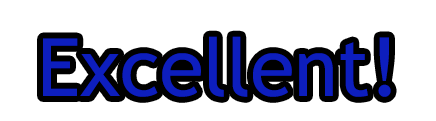
<style>
.page{position:relative;width:436px;height:121px;background:#ffffff}
.page>*{position:absolute;margin:0}
.t1{font:80px "TrebuchetMS";color:#0d1ebe}
</style>
<div class="page">
<p class="t1" style="left:43px;top:36px;width:348px;height:61px">Excellent!</p>
</div>
